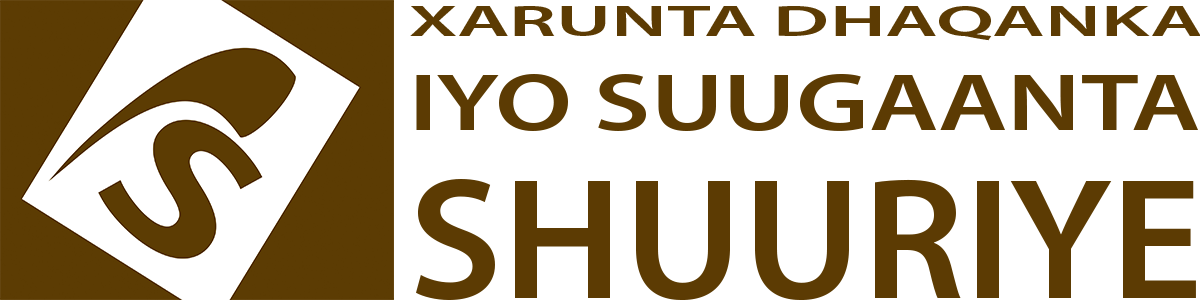
<style>
.page{position:relative;width:1200px;height:300px;background:#ffffff}
.page>*{position:absolute;margin:0}
.t1{font:43.4px "MyriadPro-Semibold";color:#5c3b03;scale:1.9 1}
.t2{font:80.9px "MyriadPro-Semibold";color:#5c3b03;scale:1.35 1}
.t3{font:173.4px "MyriadPro-Semibold";color:#5c3b03;scale:1.03 1}
</style>
<div class="page">
<p class="t1" style="left:410px;top:6px;width:791px;height:35px">XARUNTA DHAQANKA</p>
<p class="t2" style="left:416px;top:74px;width:782px;height:57px">IYO SUUGAANTA</p>
<p class="t3" style="left:416px;top:179px;width:780px;height:122px">SHUURIYE</p>
</div>
